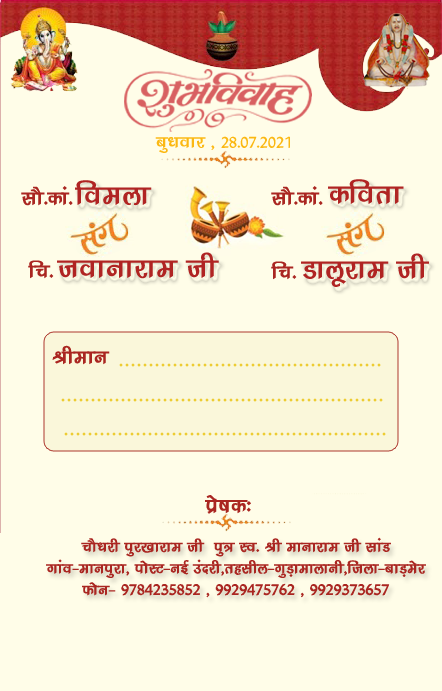
<style>
.page{position:relative;width:442px;height:691px;background:#fffde8}
.page>*{position:absolute;margin:0}
.t1{font:18.4px "KrutiDev240";color:#fbb812}
.t2{font:21px "KrutiDev240";color:#fbb812}
.t3{font:34px "KrutiDev240";color:#b02423}
.t4{font:24px "KrutiDev240";color:#aa2621}
.t5{font:24px "TimesNewRomanPSMT";color:#edcc33}
.t6{font:25px "KrutiDev240";color:#aa2621}
.t7{font:18px "KrutiDev240";color:#aa2621}
</style>
<div class="page">
<p class="t1" style="left:155px;top:136px;width:135px;height:17px"><span class="t2"> cqèkokj ]</span> 28-07-2021</p>
<p class="t3" style="left:75px;top:180px;width:77px;height:26px">foeyk</p>
<p class="t3" style="left:328px;top:179px;width:76px;height:26px">dfork</p>
<p class="t4" style="left:21px;top:186px;width:52px;height:20px">lkS-dka-</p>
<p class="t4" style="left:271px;top:186px;width:52px;height:20px">lkS-dka-</p>
<p class="t3" style="left:57px;top:252px;width:162px;height:27px">tokukjke th</p>
<p class="t3" style="left:301px;top:253px;width:128px;height:34px">Mkywjke th</p>
<p class="t4" style="left:28px;top:260px;width:26px;height:19px">fp-</p>
<p class="t4" style="left:271px;top:261px;width:26px;height:19px">fp-</p>
<p class="t4" style="left:52px;top:345px;width:58px;height:20px">Jheku</p>
<p class="t5" style="left:119px;top:363px;width:262px;height:4px">............................................</p>
<p class="t5" style="left:61px;top:398px;width:322px;height:4px">......................................................</p>
<p class="t5" style="left:64px;top:432px;width:322px;height:4px">......................................................</p>
<p class="t6" style="left:205px;top:495px;width:46px;height:19px">çs"kd%</p>
<p class="t7" style="left:46px;top:537px;width:380px;height:61px;text-align:center">pkSèkjh iqj[kkjke th  iq= Lo- Jh ekukjke th lkaM<br>xkao&amp;ekuiqjk] iksLV&amp;ubZ manjh]rglhy&amp;xqM+kekykuh]ftyk&amp;ckM+esj<br>Qksu&amp; 9784235852 ] 9929475762 ] 9929373657</p>
</div>
